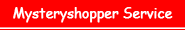
<style>
.page{position:relative;width:185px;height:30px;background:#ff0000}
.page>*{position:absolute;margin:0}
.t1{font:13.9px "ComicSansMS";letter-spacing:-0.025em;color:#ffffff;font-weight:bold}
</style>
<div class="page">
<p class="t1" style="left:13px;top:7px;width:160px;height:16px">Mysteryshopper Service</p>
</div>
